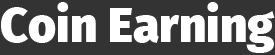
<style>
.page{position:relative;width:275px;height:55px;background:#333333}
.page>*{position:absolute;margin:0}
.t1{font:48px "FiraSans-Black";color:#ffffff}
</style>
<div class="page">
<p class="t1" style="left:1px;top:2px;width:274px;height:51px">Coin Earning</p>
</div>
